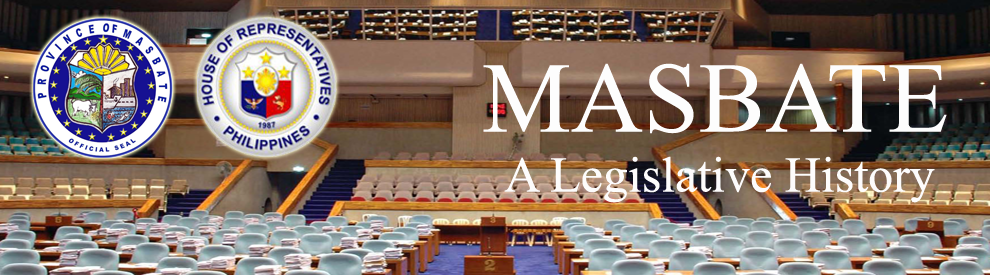
<style>
.page{position:relative;width:990px;height:275px}
.page>*{position:absolute;margin:0}
.t1{font:50px "TimesNewRomanPSMT";color:#fdfcfc}
.t2{font:100px "TimesNewRomanPSMT";color:#fdfdfd}
</style>
<div class="page">
<p class="t1" style="left:483px;top:63px;width:464px;height:140px;text-align:center"><span class="t2">MASBATE<br></span>A Legislative History</p>
</div>
